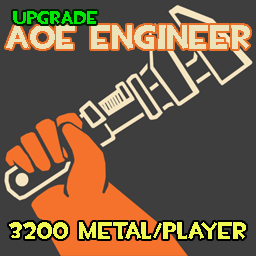
<style>
.page{position:relative;width:256px;height:256px;background:#3e3e3e}
.page>*{position:absolute;margin:0}
.t1{font:18px "TF2Build";color:#00e705}
.t2{font:34px "TF2Build";color:#ede3bb}
.t3{font:24px "TF2Build";color:#f0f850}
</style>
<div class="page">
<p class="t1" style="left:13px;top:11px;width:84px;height:13px">UPGRADE</p>
<p class="t2" style="left:6px;top:25px;width:244px;height:24px">AOE ENGINEER</p>
<p class="t3" style="left:9px;top:222px;width:237px;height:17px">3200 metal/player</p>
</div>
